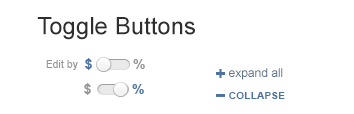
<style>
.page{position:relative;width:354px;height:114px;background:#ffffff}
.page>*{position:absolute;margin:0}
.t1{font:24px "ArialMT";color:#2e2e2e}
.t2{font:11px "ArialMT";letter-spacing:0.025em;color:#949494;scale:0.9 1}
.t3{font:14px "Arial-BoldMT";letter-spacing:0.01em;color:#4c72a1}
.t4{font:14px "Arial-BoldMT";letter-spacing:0.01em;color:#979797}
.t5{font:18px "Arial-BoldMT";color:#4c72a1}
.t6{font:12px "ArialMT";color:#5a7088}
.t7{font:10px "Arial-BoldMT";letter-spacing:0.025em;color:#4c72a1;text-transform:uppercase}
</style>
<div class="page">
<p class="t1" style="left:37px;top:17px;width:158px;height:23px">Toggle Buttons</p>
<p class="t2" style="left:46px;top:60px;width:32px;height:10px">Edit by</p>
<p class="t3" style="left:85px;top:58px;width:60px;height:12px">$          <span class="t4">%</span></p>
<p class="t5" style="left:216px;top:69px;width:9px;height:9px">+</p>
<p class="t6" style="left:229px;top:68px;width:54px;height:12px">expand all</p>
<p class="t4" style="left:84px;top:83px;width:60px;height:12px">$ <span class="t3">         %</span></p>
<p class="t7" style="left:229px;top:92px;width:56px;height:7px">COLLAPSE</p>
</div>
